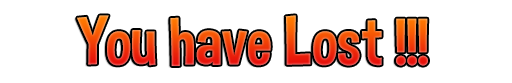
<style>
.page{position:relative;width:512px;height:83px;background:#ffffff}
.page>*{position:absolute;margin:0}
.t1{font:68px "DimboRegular"}
</style>
<div class="page">
<p class="t1" style="left:77px;top:15px;width:351px;height:51px">You have Lost !!!</p>
</div>
